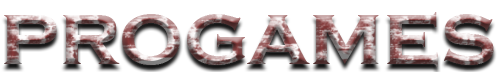
<style>
.page{position:relative;width:500px;height:72px;background:#ffffff}
.page>*{position:absolute;margin:0}
.t1{font:90px "CopperplateGothic-Bold"}
</style>
<div class="page">
<p class="t1" style="left:4px;top:12px;width:490px;height:55px">progames</p>
</div>
